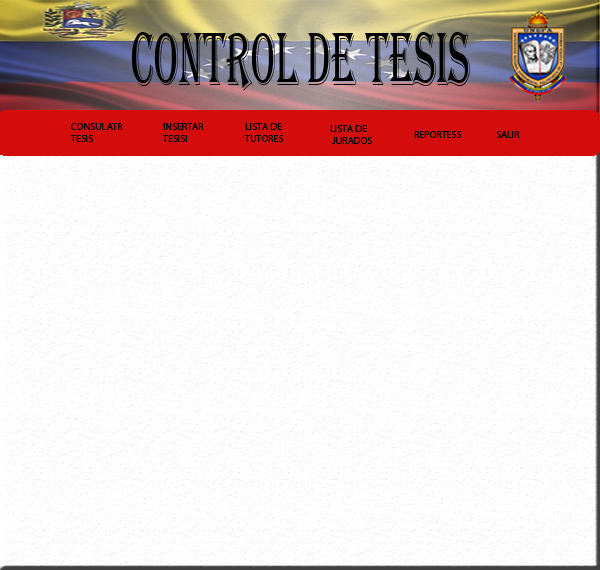
<style>
.page{position:relative;width:600px;height:570px;background:#ffffff}
.page>*{position:absolute;margin:0}
.t1{font:77.6px "Algerian";color:#000000;scale:0.51 1}
.t2{font:10px "MyriadPro-Regular";color:#060606}
</style>
<div class="page">
<p class="t1" style="left:131px;top:32px;width:339px;height:59px">CONTROL DE TESIS</p>
<p class="t2" style="left:70px;top:123px;width:53px;height:19px">CONSULATR<br>TESIS</p>
<p class="t2" style="left:162px;top:123px;width:42px;height:19px">INSERTAR<br>TESISI</p>
<p class="t2" style="left:244px;top:123px;width:40px;height:19px">LISTA DE <br>TUTORES</p>
<p class="t2" style="left:330px;top:125px;width:42px;height:19px">LISTA DE<br> JURADOS</p>
<p class="t2" style="left:414px;top:131px;width:48px;height:7px">REPORTESS</p>
<p class="t2" style="left:496px;top:131px;width:24px;height:7px">SALIR</p>
</div>
